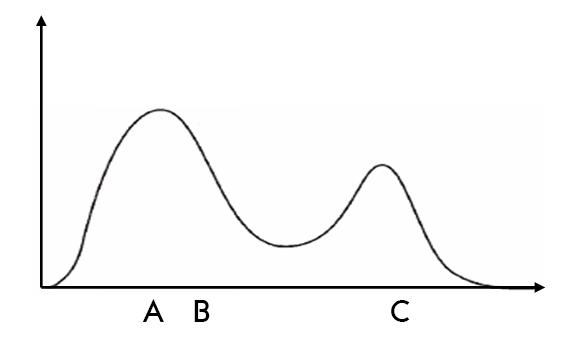
<style>
.page{position:relative;width:562px;height:342px;background:#ffffff}
.page>*{position:absolute;margin:0}
.t1{font:30px "Lissen";letter-spacing:0.025em;color:#000000}
</style>
<div class="page">
<p class="t1" style="left:142px;top:299px;width:268px;height:23px">A   B                   C</p>
</div>
